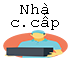
<style>
.page{position:relative;width:71px;height:58px;background:#ffffff}
.page>*{position:absolute;margin:0}
.t1{font:12px/13.3px "CourierNewPSMT";color:#000000}
</style>
<div class="page">
<p class="t1" style="left:11px;top:3px;width:48px;height:27px;text-align:center">Nhà<br>c.cấp</p>
</div>
